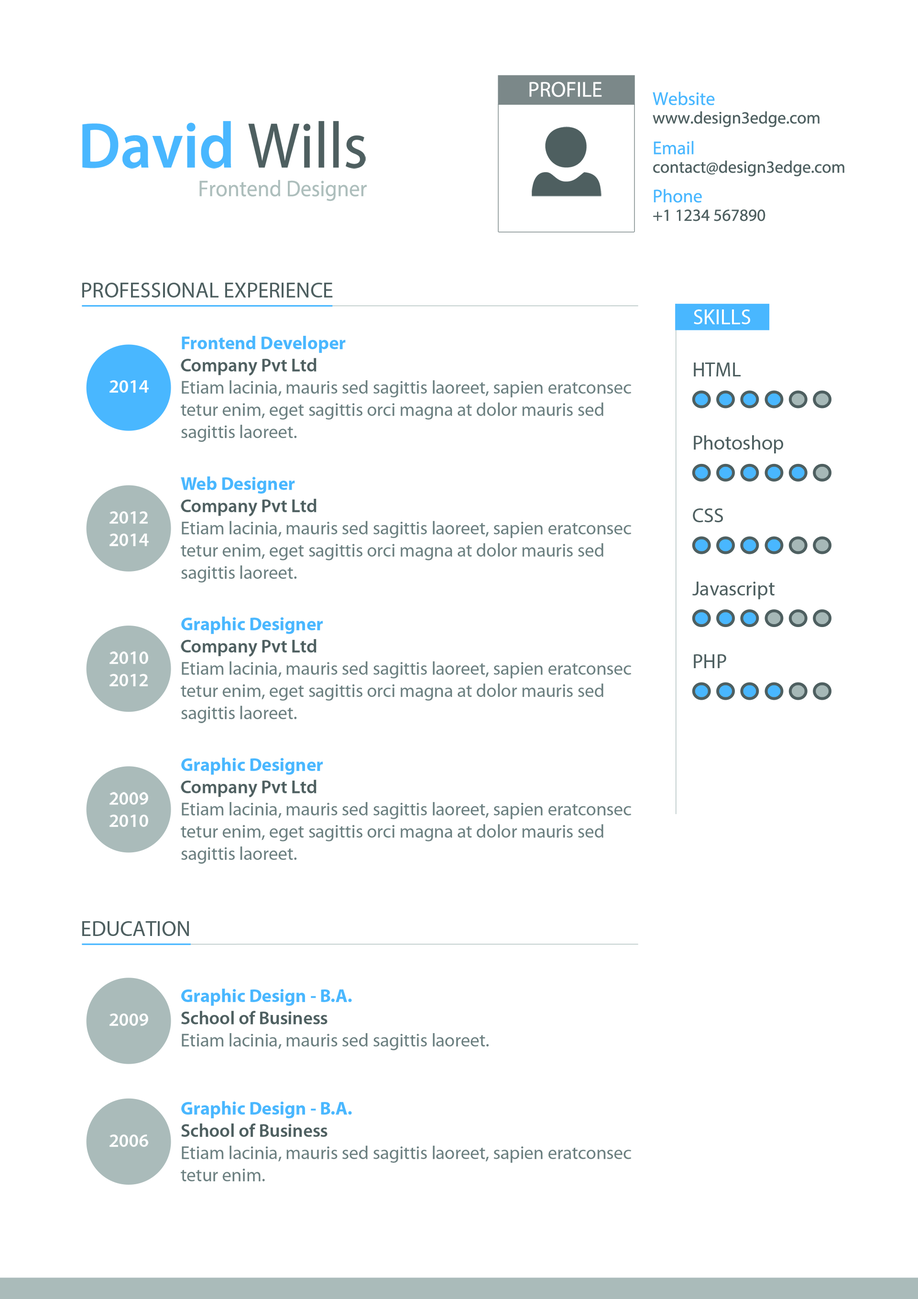
<style>
.page{position:relative;width:918px;height:1299px;background:#ffffff}
.page>*{position:absolute;margin:0}
.t1{font:21.6px "MyriadPro-Regular";color:#ffffff;text-transform:uppercase}
.t2{font:18.5px "MyriadPro-Regular";color:#49b7ff}
.t3{font:17px "MyriadPro-Regular";color:#4e5f60}
.t4{font:64.8px "MyriadPro-Semibold";color:#49b7ff;scale:0.95 1}
.t5{font:64.8px "MyriadPro-Regular";color:#4f5f61;scale:0.95 1}
.t6{font:22.7px "MyriadPro-Regular";color:#adbebc;scale:0.95 1}
.t7{font:21.6px "MyriadPro-Regular";color:#4f5f61;text-transform:uppercase}
.t8{font:18.5px "MyriadPro-Regular";color:#6b7e7f}
.t9{font:18.5px "MyriadPro-Bold";color:#49b7ff}
.t10{font:18.5px "MyriadPro-Semibold";color:#4e5f60}
.t11{font:20.1px "MyriadPro-Regular";color:#4e5f60}
.t12{font:18.5px "MyriadPro-Semibold";color:#ffffff}
</style>
<div class="page">
<p class="t1" style="left:529px;top:82px;width:73px;height:15px">Profile</p>
<p class="t2" style="left:653px;top:91px;width:62px;height:14px">Website</p>
<p class="t3" style="left:653px;top:111px;width:167px;height:16px">www.design3edge.com</p>
<p class="t4" style="left:82px;top:121px;width:284px;height:48px">David <span class="t5">Wills</span></p>
<p class="t2" style="left:654px;top:141px;width:40px;height:13px">Email</p>
<p class="t3" style="left:653px;top:160px;width:191px;height:16px">contact@design3edge.com</p>
<p class="t6" style="left:199px;top:180px;width:168px;height:21px">Frontend Designer</p>
<p class="t2" style="left:654px;top:189px;width:48px;height:14px">Phone</p>
<p class="t3" style="left:653px;top:209px;width:113px;height:12px">+1 1234 567890</p>
<p class="t7" style="left:82px;top:283px;width:251px;height:14px">Professional experience</p>
<p class="t1" style="left:694px;top:309px;width:56px;height:15px">SKILLS</p>
<p class="t8" style="left:181px;top:336px;width:450px;height:106px"><span class="t9">Frontend Developer<br></span><span class="t10">Company Pvt Ltd<br></span>Etiam lacinia, mauris sed sagittis laoreet, sapien eratconsec<br>tetur enim, eget sagittis orci magna at dolor mauris sed sagittis laoreet.</p>
<p class="t11" style="left:694px;top:362px;width:47px;height:14px">HTML</p>
<p class="t12" style="left:110px;top:380px;width:39px;height:13px">2014</p>
<p class="t11" style="left:694px;top:435px;width:89px;height:18px">Photoshop</p>
<p class="t8" style="left:181px;top:476px;width:450px;height:106px"><span class="t9">Web Designer<br></span><span class="t10">Company Pvt Ltd<br></span>Etiam lacinia, mauris sed sagittis laoreet, sapien eratconsec<br>tetur enim, eget sagittis orci magna at dolor mauris sed sagittis laoreet.</p>
<p class="t11" style="left:693px;top:508px;width:30px;height:14px">CSS</p>
<p class="t12" style="left:110px;top:511px;width:39px;height:35px">2012<br>2014</p>
<p class="t11" style="left:692px;top:581px;width:83px;height:18px">Javascript</p>
<p class="t8" style="left:181px;top:616px;width:450px;height:107px"><span class="t9">Graphic Designer<br></span><span class="t10">Company Pvt Ltd<br></span>Etiam lacinia, mauris sed sagittis laoreet, sapien eratconsec<br>tetur enim, eget sagittis orci magna at dolor mauris sed sagittis laoreet.</p>
<p class="t12" style="left:110px;top:651px;width:38px;height:35px">2010<br>2012</p>
<p class="t11" style="left:694px;top:654px;width:32px;height:14px">PHP</p>
<p class="t8" style="left:181px;top:757px;width:450px;height:107px"><span class="t9">Graphic Designer<br></span><span class="t10">Company Pvt Ltd<br></span>Etiam lacinia, mauris sed sagittis laoreet, sapien eratconsec<br>tetur enim, eget sagittis orci magna at dolor mauris sed sagittis laoreet.</p>
<p class="t12" style="left:110px;top:792px;width:38px;height:35px">2009<br>2010</p>
<p class="t7" style="left:82px;top:921px;width:107px;height:15px">Education</p>
<p class="t8" style="left:181px;top:988px;width:308px;height:62px"><span class="t9">Graphic Design - B.A.<br></span><span class="t10">School of Business<br></span>Etiam lacinia, mauris sed sagittis laoreet.</p>
<p class="t12" style="left:110px;top:1013px;width:38px;height:13px">2009</p>
<p class="t8" style="left:181px;top:1101px;width:450px;height:80px"><span class="t9">Graphic Design - B.A.<br></span><span class="t10">School of Business<br></span>Etiam lacinia, mauris sed sagittis laoreet, sapien eratconsec<br>tetur enim.</p>
<p class="t12" style="left:110px;top:1134px;width:39px;height:13px">2006</p>
</div>
